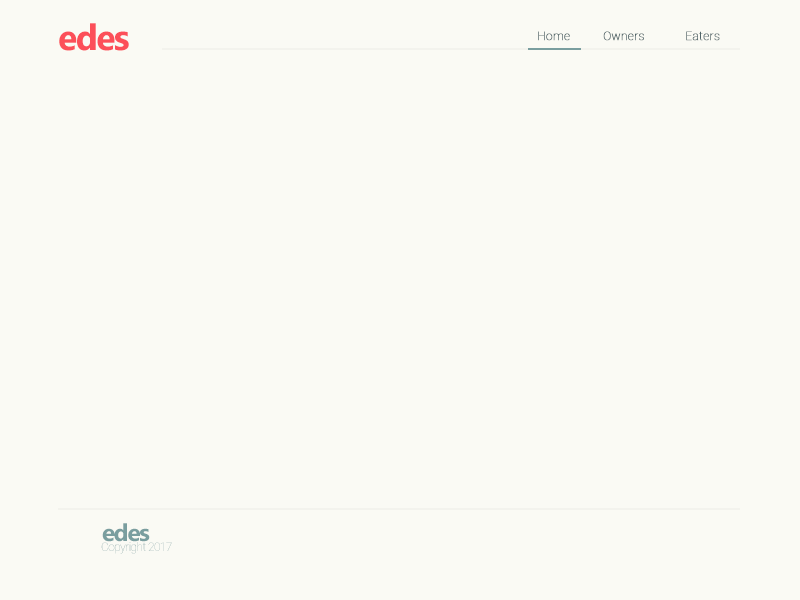
<style>
.page{position:relative;width:800px;height:600px;background:#fafaf4}
.page>*{position:absolute;margin:0}
.t1{font:36px "MyanmarText-Bold";letter-spacing:-0.05em;color:#fc4f59}
.t2{font:12px "Roboto-Thin";font-weight:bold}
.t3{font:12px "Roboto-Thin";color:#4f6367;font-weight:bold}
.t4{font:24px "MyanmarText-Bold";letter-spacing:-0.05em;color:#7a9e9f}
.t5{font:12px "Roboto-Thin";letter-spacing:-0.05em}
</style>
<div class="page">
<p class="t1" style="left:59px;top:23px;width:70px;height:28px">edes</p>
<p class="t2" style="left:538px;top:31px;width:32px;height:10px">Home</p>
<p class="t3" style="left:603px;top:31px;width:41px;height:10px">Owners</p>
<p class="t3" style="left:686px;top:31px;width:34px;height:10px">Eaters</p>
<p class="t4" style="left:102px;top:523px;width:48px;height:19px">edes</p>
<p class="t5" style="left:101px;top:542px;width:71px;height:12px">Copyright 2017</p>
</div>
